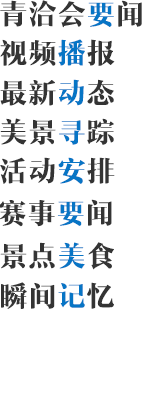
<style>
.page{position:relative;width:142px;height:400px;background:#ffffff}
.page>*{position:absolute;margin:0}
.t1{font:27.5px "MFShangYa_Noncommercial-Regular";color:#343434;font-weight:bold;scale:1.03 1}
.t2{font:27.5px "MFShangYa_Noncommercial-Regular";color:#0775c5;font-weight:bold;scale:1.03 1}
</style>
<div class="page">
<p class="t1" style="left:0px;top:0px;width:142px;height:28px">青洽会<span class="t2">要</span>闻</p>
<p class="t1" style="left:0px;top:39px;width:115px;height:27px">视频<span class="t2">播</span>报</p>
<p class="t1" style="left:0px;top:79px;width:114px;height:27px">最新<span class="t2">动</span>态</p>
<p class="t1" style="left:0px;top:118px;width:114px;height:27px">美景<span class="t2">寻</span>踪</p>
<p class="t1" style="left:0px;top:157px;width:115px;height:27px">活动<span class="t2">安</span>排</p>
<p class="t1" style="left:0px;top:199px;width:112px;height:28px">赛事<span class="t2">要</span>闻</p>
<p class="t1" style="left:0px;top:242px;width:114px;height:28px">景点<span class="t2">美</span>食</p>
<p class="t1" style="left:1px;top:282px;width:113px;height:27px">瞬间<span class="t2">记</span>忆</p>
</div>
